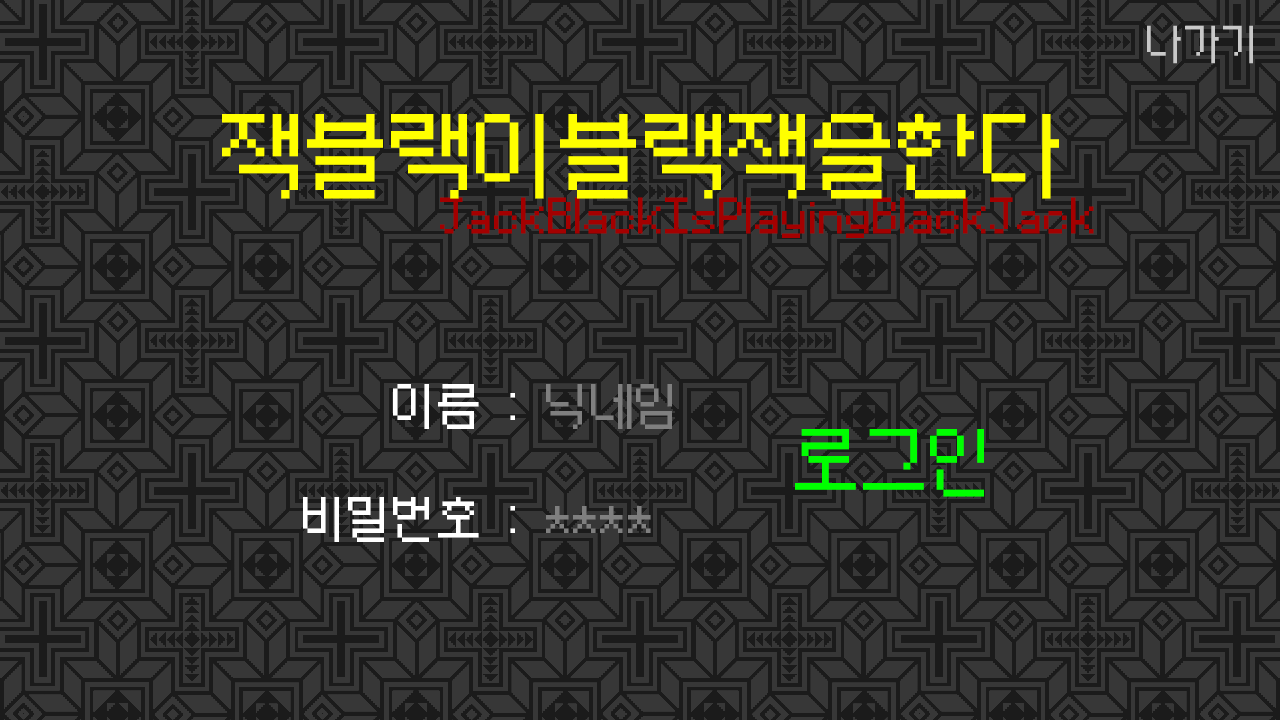
<style>
.page{position:relative;width:1280px;height:720px;background:#373737}
.page>*{position:absolute;margin:0}
.t1{font:90px "soya_non8";color:#ffff00}
.t2{font:48px "soya_non8";color:#a40000}
.t3{font:48px "soya_non8";color:#ffffff}
.t4{font:48px "soya_non8";color:#7f7f7f}
.t5{font:72px "soya_non8";color:#00ff00}
</style>
<div class="page">
<p class="t1" style="left:222px;top:114px;width:837px;height:85px">잭블랙이블랙잭을한다</p>
<p class="t2" style="left:440px;top:197px;width:654px;height:41px">JackBlackIsPlayingBlackJack</p>
<p class="t3" style="left:393px;top:384px;width:279px;height:45px">이름 : <span class="t4">닉네임</span></p>
<p class="t5" style="left:795px;top:429px;width:189px;height:68px">로그인</p>
<p class="t3" style="left:303px;top:497px;width:348px;height:45px">비밀번호 : <span class="t4">****</span></p>
</div>
